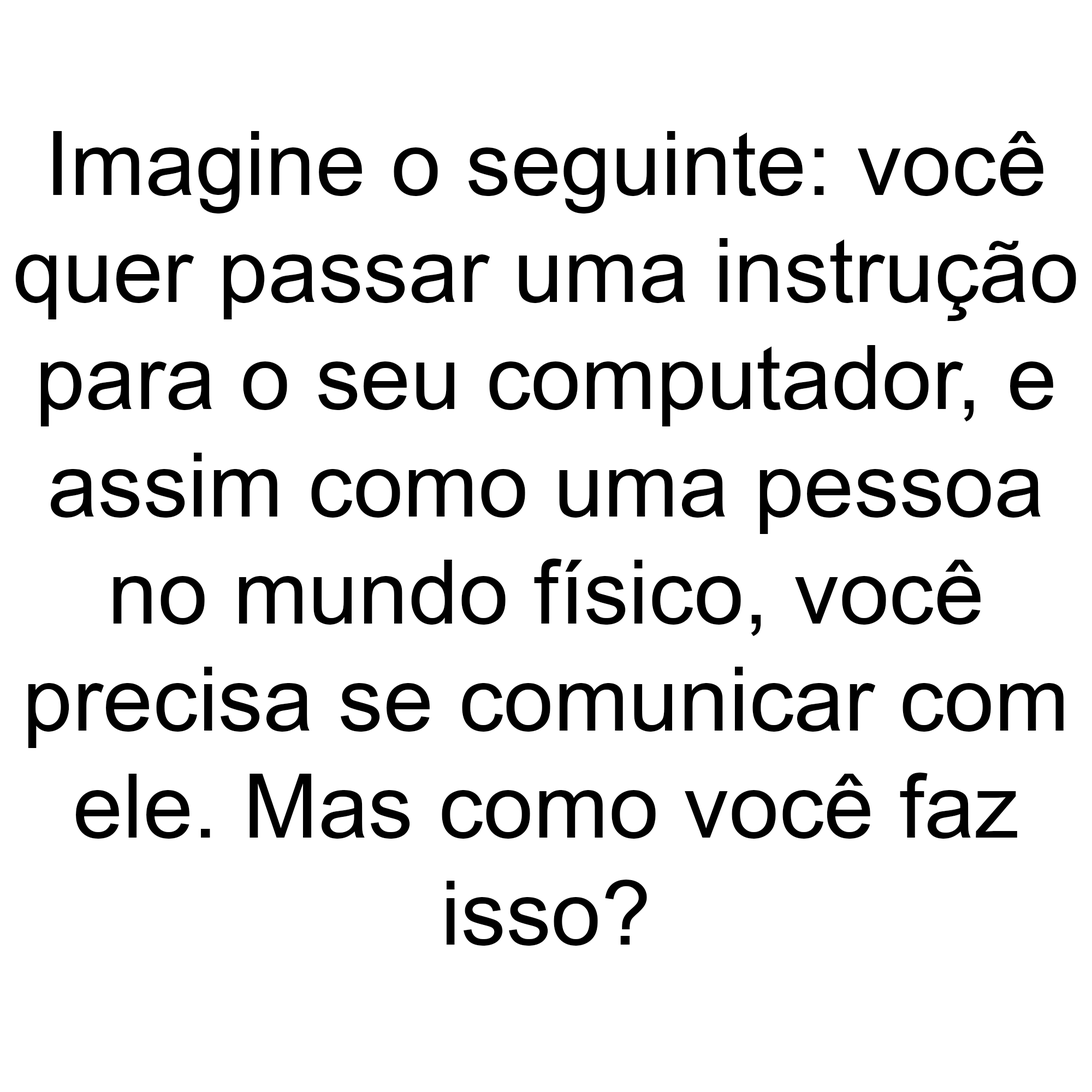
<style>
.page{position:relative;width:1092px;height:1092px;background:#ffffff}
.page>*{position:absolute;margin:0}
.t1{font:89.2px "ArialMT";color:#000000}
</style>
<div class="page">
<p class="t1" style="left:15px;top:131px;width:1061px;height:815px;text-align:center">Imagine o seguinte: você<br>quer passar uma instrução<br>para o seu computador, e<br>assim como uma pessoa<br>no mundo físico, você<br>precisa se comunicar com<br>ele. Mas como você faz<br>isso?</p>
</div>
